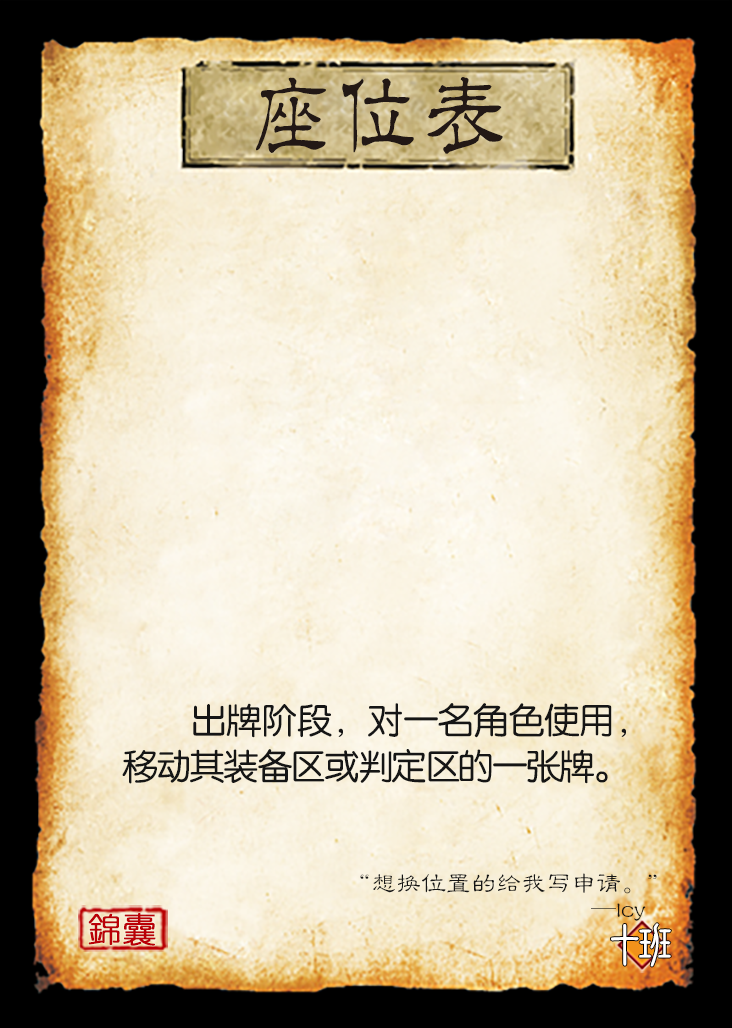
<style>
.page{position:relative;width:732px;height:1028px}
.page>*{position:absolute;margin:0}
.t1{font:91.7px "JMFLS_GBK";color:#221815;scale:0.95 1}
.t2{font:35.4px/45.8px "FZY3JW--GB1-0";letter-spacing:-0.05em;color:#151515}
.t3{font:25px/25px "FZLBJW--GB1-0";color:#151515}
.t4{font:33.3px "YouYuan";color:#ba0007;font-weight:bold}
.t5{font:50px "DFNewChuan-W5-WINP-BF";letter-spacing:-0.4em;color:#ffffff}
</style>
<div class="page">
<p class="t1" style="left:256px;top:77px;width:247px;height:77px">座位表</p>
<p class="t2" style="left:122px;top:703px;width:504px;height:81px;text-align:justify">出牌阶段，对一名角色使用，移动其装备区或判定区的一张牌。</p>
<p class="t3" style="left:360px;top:873px;width:297px;height:48px;text-align:right">“想换位置的给我写申请。”<br>                                      —lcy</p>
<p class="t4" style="left:88px;top:913px;width:68px;height:33px">錦囊</p>
<p class="t5" style="left:611px;top:923px;width:60px;height:44px">十班</p>
</div>
